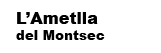
<style>
.page{position:relative;width:161px;height:53px;background:#ffffff}
.page>*{position:absolute;margin:0}
.t1{font:13.3px "Arial-Black";color:#000000}
.t2{font:16px "Arial-Black";color:#000000}
</style>
<div class="page">
<p class="t1" style="left:16px;top:12px;width:89px;height:28px"><span class="t2">L’Ametlla<br></span>del Montsec</p>
</div>
